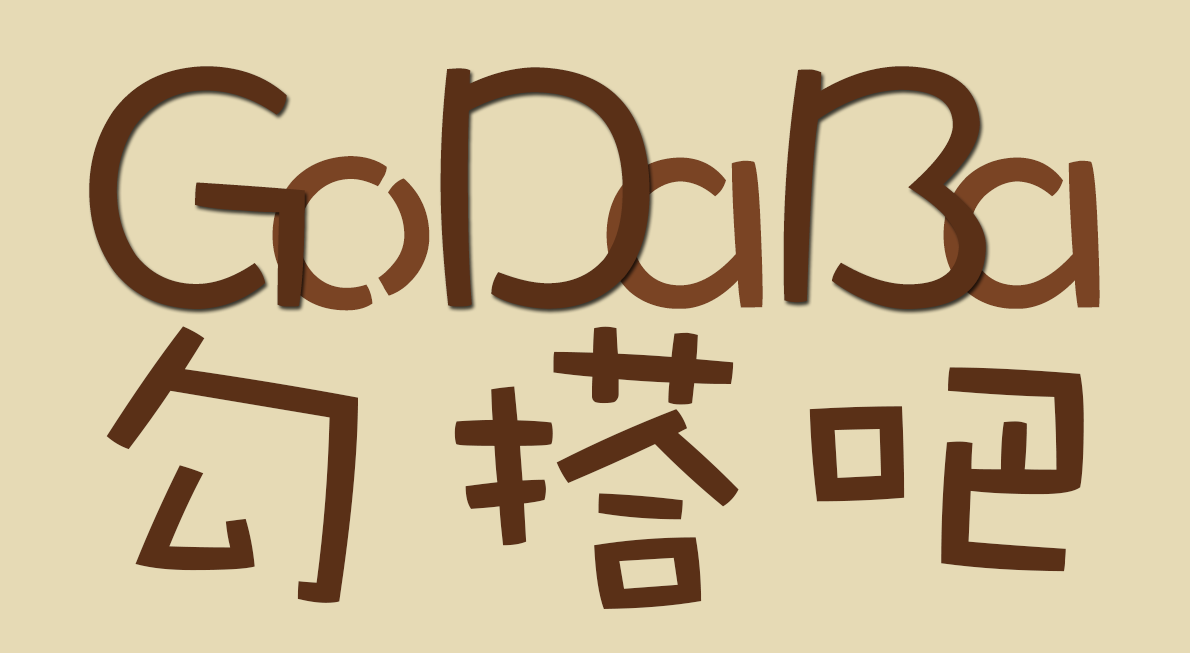
<style>
.page{position:relative;width:1190px;height:653px;background:#e6dab5}
.page>*{position:absolute;margin:0}
.t1{font:360px "DFWaWaTC-W5";letter-spacing:-0.025em;color:#5a3017}
.t2{font:360px "DFWaWaTC-W5";letter-spacing:0.05em;color:#7a4424}
.t3{font:360px "DFWaWaSC-W5";color:#5a3017}
</style>
<div class="page">
<p class="t1" style="left:89px;top:66px;width:897px;height:243px">G D B</p>
<p class="t2" style="left:272px;top:156px;width:828px;height:155px">o a a</p>
<p class="t3" style="left:106px;top:326px;width:978px;height:283px">勾搭吧</p>
</div>
